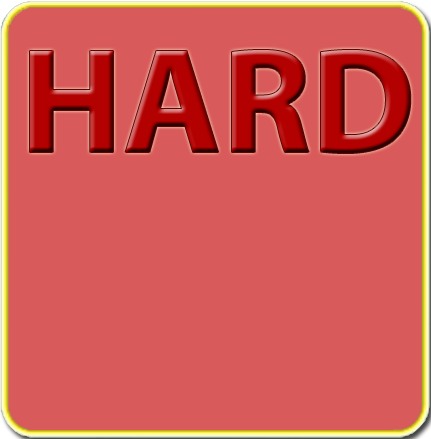
<style>
.page{position:relative;width:431px;height:439px;background:#d95a5a}
.page>*{position:absolute;margin:0}
.t1{font:150px "MyriadPro-Bold"}
</style>
<div class="page">
<p class="t1" style="left:30px;top:50px;width:381px;height:103px">HARD</p>
</div>
